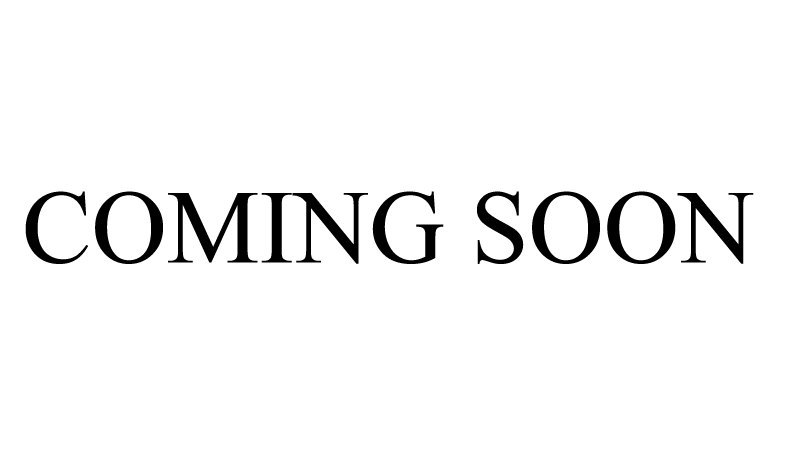
<style>
.page{position:relative;width:800px;height:464px;background:#ffffff}
.page>*{position:absolute;margin:0}
.t1{font:104.2px "TimesNewRomanPSMT";color:#010000}
</style>
<div class="page">
<p class="t1" style="left:25px;top:191px;width:729px;height:73px">COMING SOON</p>
</div>
